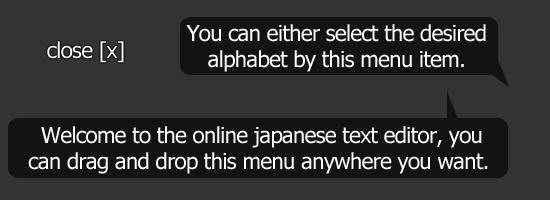
<style>
.page{position:relative;width:550px;height:200px;background:#333333}
.page>*{position:absolute;margin:0}
.t1{font:22px "Tahoma";letter-spacing:-0.025em;color:#ffffff}
</style>
<div class="page">
<p class="t1" style="left:186px;top:24px;width:300px;height:48px;text-align:center">You can either select the desired <br>alphabet by this menu item.</p>
<p class="t1" style="left:47px;top:41px;width:77px;height:22px">close [x]</p>
<p class="t1" style="left:28px;top:126px;width:460px;height:48px;text-align:center">Welcome to the online japanese text editor, you<br>can drag and drop this menu anywhere you want.</p>
</div>
